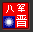
<style>
.page{position:relative;width:33px;height:32px;background:#f20000}
.page>*{position:absolute;margin:0}
.t1{font:10.4px "SimSun";color:#ffffff}
.t2{font:11.7px "SimSun";color:#ffffff}
</style>
<div class="page">
<p class="t1" style="left:6px;top:4px;width:19px;height:9px">八军</p>
<p class="t2" style="left:16px;top:15px;width:11px;height:12px">晋</p>
</div>
